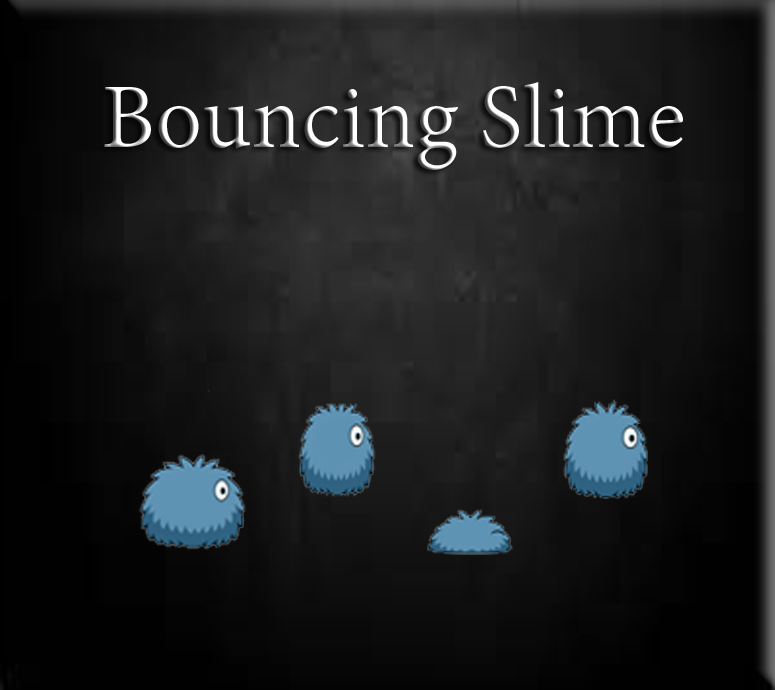
<style>
.page{position:relative;width:775px;height:690px}
.page>*{position:absolute;margin:0}
.t1{font:92px "MinionPro-Regular"}
</style>
<div class="page">
<p class="t1" style="left:104px;top:82px;width:579px;height:88px">Bouncing Slime</p>
</div>
